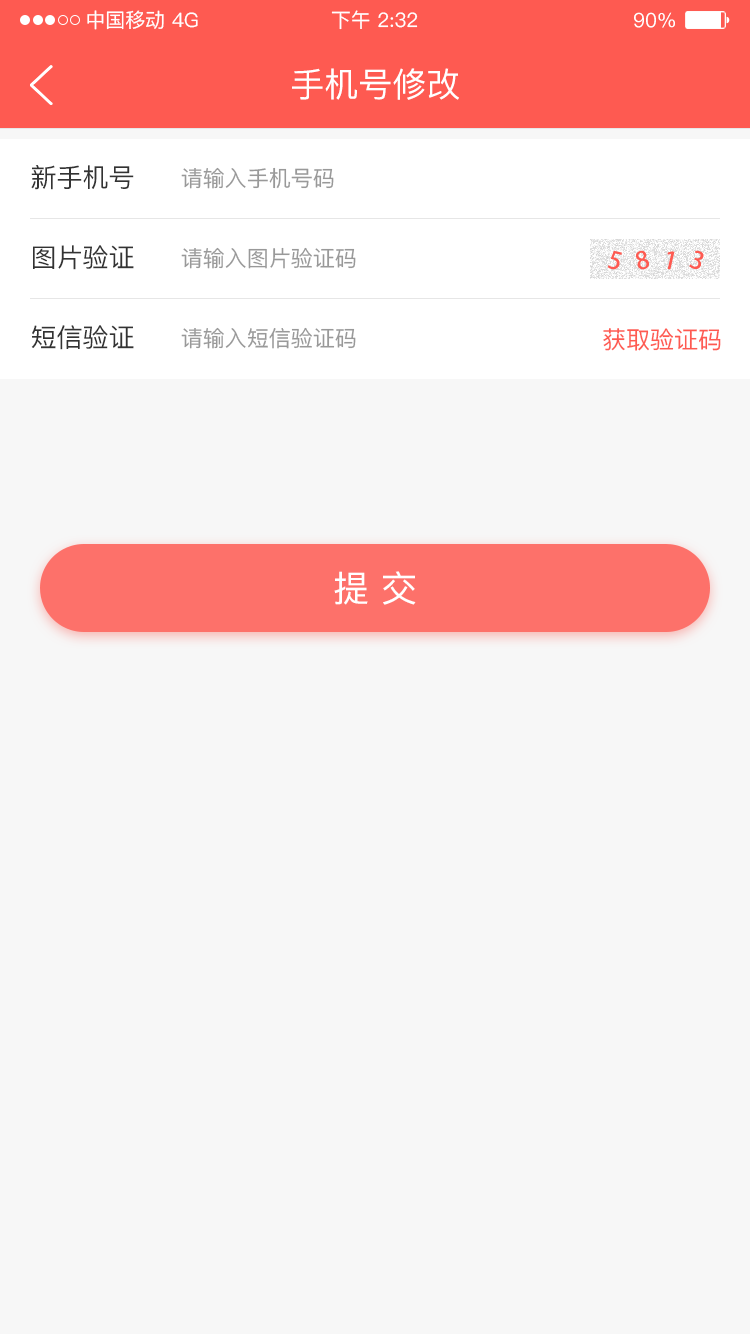
<style>
.page{position:relative;width:750px;height:1334px;background:#f7f7f7}
.page>*{position:absolute;margin:0}
.t1{font:20px "PingFang-SC-Medium";color:#ffffff}
.t2{font:34px "PingFang-SC-Medium";color:#ffffff}
.t3{font:26px "PingFang-SC-Medium";color:#333333}
.t4{font:22px "PingFang-SC-Medium";color:#999999}
.t5{font:24px "PingFang-SC-Medium";color:#fe5a51}
.t6{font:36px "PingFang-SC-Medium";color:#ffffff}
</style>
<div class="page">
<p class="t1" style="left:87px;top:10px;width:77px;height:20px">中国移动</p>
<p class="t1" style="left:172px;top:12px;width:26px;height:16px">4G</p>
<p class="t1" style="left:331px;top:10px;width:87px;height:20px">下午 2:32</p>
<p class="t1" style="left:634px;top:12px;width:41px;height:16px">90%</p>
<p class="t2" style="left:292px;top:68px;width:167px;height:32px">手机号修改</p>
<p class="t3" style="left:31px;top:165px;width:103px;height:25px">新手机号</p>
<p class="t4" style="left:181px;top:167px;width:153px;height:22px">请输入手机号码</p>
<p class="t3" style="left:33px;top:245px;width:101px;height:25px">图片验证</p>
<p class="t4" style="left:181px;top:247px;width:175px;height:22px">请输入图片验证码</p>
<p class="t3" style="left:31px;top:325px;width:103px;height:25px">短信验证</p>
<p class="t4" style="left:181px;top:327px;width:175px;height:22px">请输入短信验证码</p>
<p class="t5" style="left:603px;top:328px;width:118px;height:23px">获取验证码</p>
<p class="t6" style="left:334px;top:571px;width:82px;height:34px">提 交</p>
</div>
